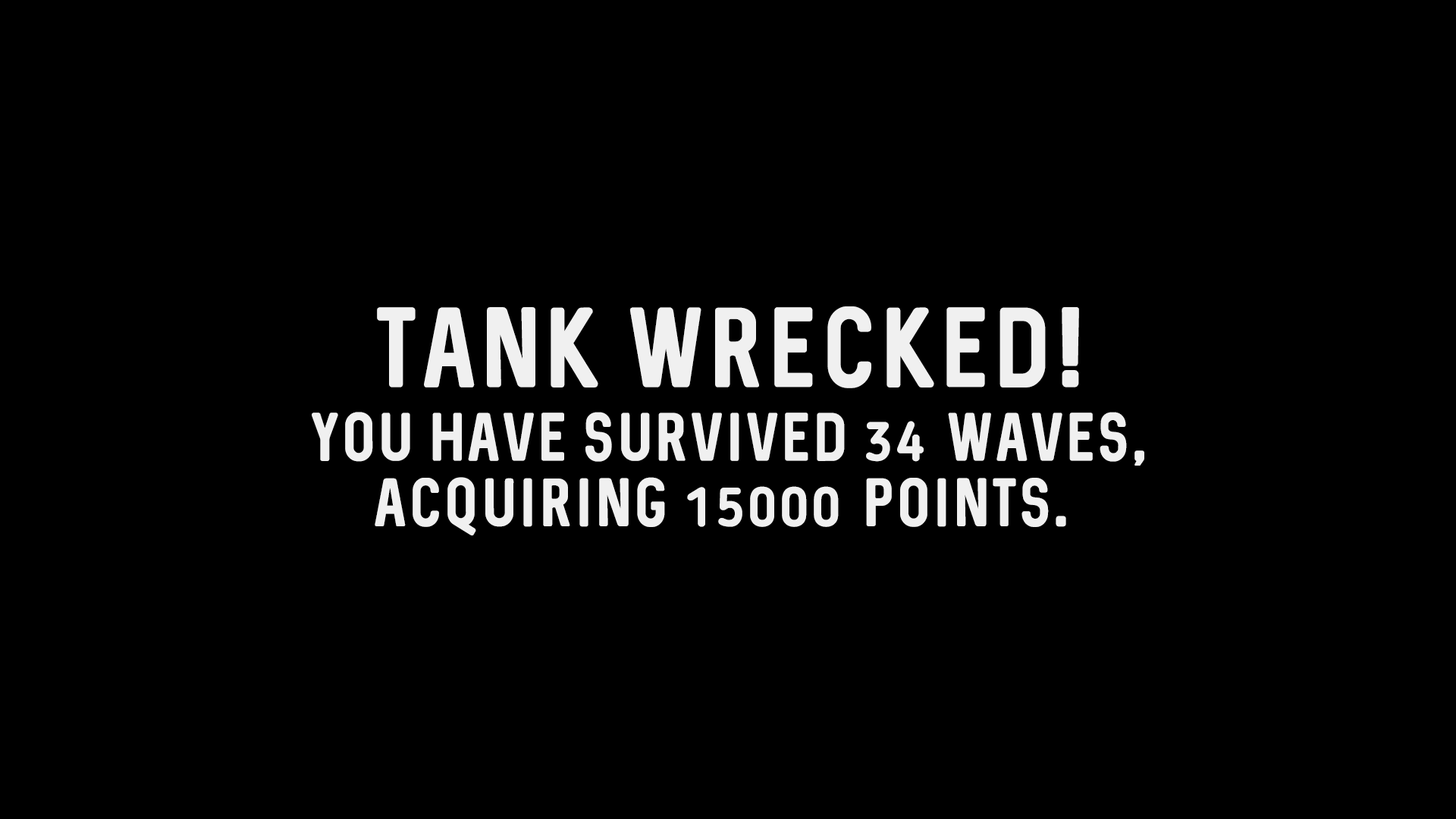
<style>
.page{position:relative;width:1456px;height:819px;background:#000000}
.page>*{position:absolute;margin:0}
.t1{font:91px "Sequel-Regular";letter-spacing:0.075em;color:#f0f0f0;text-transform:uppercase;scale:0.95 1}
.t2{font:54.6px "Sequel-Regular";letter-spacing:0.075em;color:#f0f0f0;text-transform:uppercase;scale:0.95 1}
.t3{font:54.6px "BloggerSans-Bold";letter-spacing:0.075em;color:#f0f0f0;text-transform:uppercase;scale:0.95 1}
</style>
<div class="page">
<p class="t1" style="left:377px;top:306px;width:702px;height:82px">Tank wrecked!</p>
<p class="t2" style="left:312px;top:412px;width:832px;height:124px;text-align:center">you have survived <span class="t3">34 </span>waves,<br>acquiring <span class="t3">15000 </span>points.</p>
</div>
